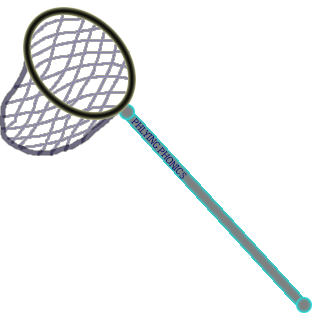
<style>
.page{position:relative;width:320px;height:320px;background:#ffffff}
.page>*{position:absolute;margin:0}
.t1{font:9px "KozMinPr6N-ExtraLight";color:#0a1975}
.t2{font:9px "KozMinPr6N-ExtraLight";letter-spacing:-0.05em;color:#0a1975}
</style>
<div class="page">
<p class="t1" style="left:131px;top:117px;width:56px;height:62px;rotate:49deg">PH<span class="t2">L</span>YING PHONICS</p>
</div>
